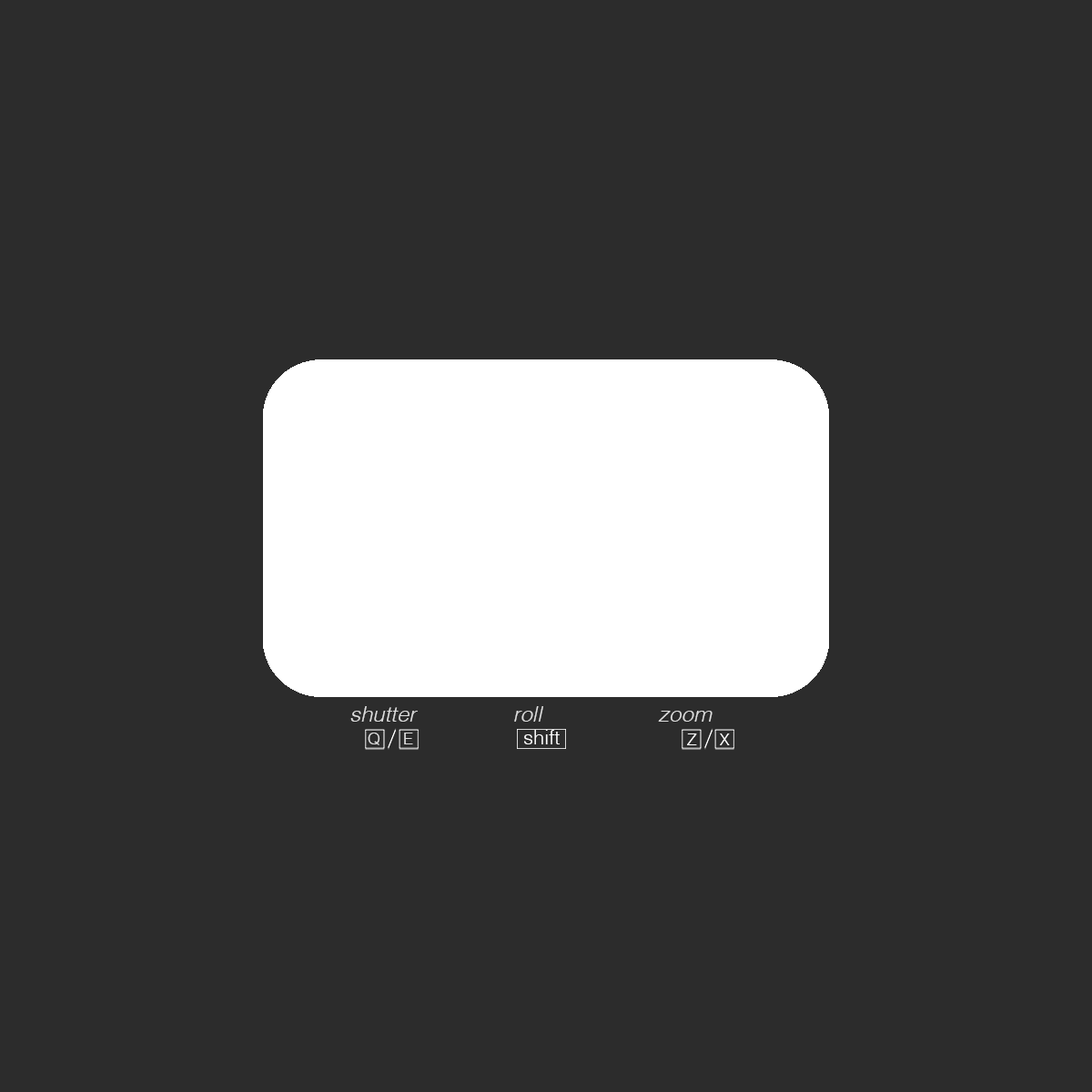
<style>
.page{position:relative;width:1092px;height:1092px;background:#2c2c2c}
.page>*{position:absolute;margin:0}
.t1{font:21.8px "Helvetica-LightOblique";color:#dedede}
.t2{font:16.4px "Helvetica-Light";color:#dedede}
.t3{font:20px "Helvetica-Light";color:#ffffff}
.t4{font:16.4px "Helvetica-Light";color:#ffffff}
</style>
<div class="page">
<p class="t1" style="left:350px;top:706px;width:68px;height:16px">shutter</p>
<p class="t1" style="left:514px;top:706px;width:29px;height:16px">roll</p>
<p class="t1" style="left:658px;top:711px;width:55px;height:11px">zoom</p>
<p class="t2" style="left:368px;top:733px;width:45px;height:12px">Q     E</p>
<p class="t3" style="left:524px;top:730px;width:36px;height:14px">shift</p>
<p class="t4" style="left:687px;top:733px;width:43px;height:12px">Z     X</p>
</div>
